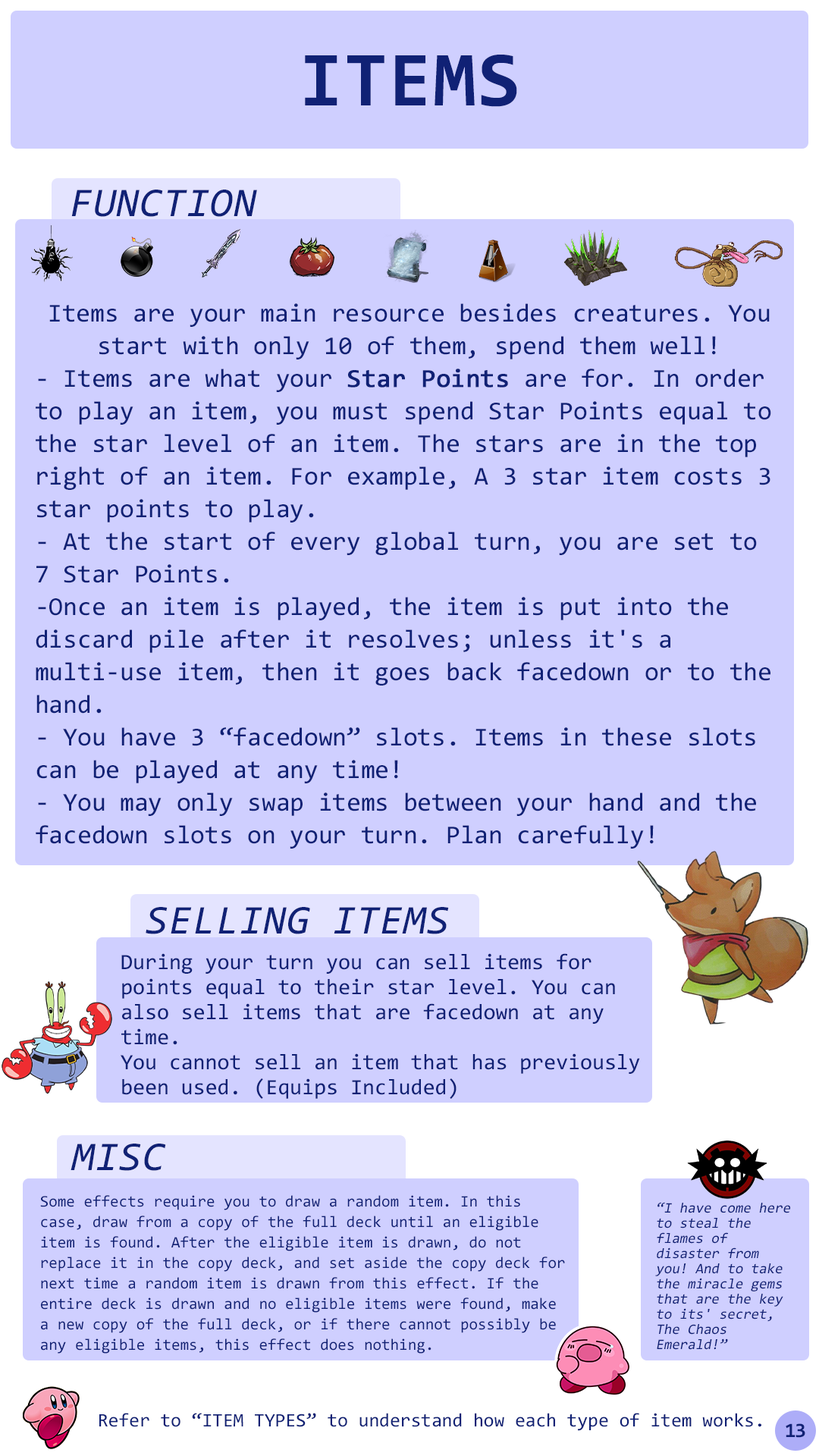
<style>
.page{position:relative;width:819px;height:1456px;background:#cfcfff}
.page>*{position:absolute;margin:0}
.t1{font:78.3px "Consolas-Bold";letter-spacing:0.02em;color:#102175}
.t2{font:41.1px "Consolas-Italic";letter-spacing:0.02em;color:#102175}
.t3{font:25.8px/32.6px "Consolas";color:#102175}
.t4{font:25.8px/32.6px "Consolas";color:#102175;font-weight:bold}
.t5{font:22px/25px "Consolas";color:#102175}
.t6{font:15.9px/20.5px "Consolas";color:#102175}
.t7{font:14.4px/15.2px "Consolas";color:#102175;font-style:italic}
.t8{font:19px "Consolas";color:#102175}
.t9{font:20.5px "Consolas-Bold";letter-spacing:-0.06em;color:#102175}
</style>
<div class="page">
<p class="t1" style="left:305px;top:55px;width:212px;height:52px">ITEMS</p>
<p class="t2" style="left:71px;top:190px;width:186px;height:27px">FUNCTION</p>
<p class="t3" style="left:36px;top:303px;width:735px;height:546px;text-align:center">Items are your main resource besides creatures. You start with only 10 of them, spend them well!<br>- Items are what your <span class="t4">Star Points</span> are for. In order to play an item, you must spend Star Points equal to the star level of an item. The stars are in the top right of an item. For example, A 3 star item costs 3 star points to play.<br>- At the start of every global turn, you are set to 7 Star Points.<br>-Once an item is played, the item is put into the discard pile after it resolves; unless it's a multi-use item, then it goes back facedown or to the hand.<br>- You have 3 “facedown” slots. Items in these slots can be played at any time!<br>- You may only swap items between your hand and the facedown slots on your turn. Plan carefully!</p>
<p class="t2" style="left:146px;top:907px;width:303px;height:27px">SELLING ITEMS</p>
<p class="t5" style="left:121px;top:953px;width:519px;height:146px">During your turn you can sell items for points equal to their star level. You can also sell items that are facedown at any time.<br>You cannot sell an item that has previously been used. (Equips Included)</p>
<p class="t2" style="left:71px;top:1144px;width:95px;height:27px">MISC</p>
<p class="t6" style="left:40px;top:1195px;width:525px;height:159px">Some effects require you to draw a random item. In this case, draw from a copy of the full deck until an eligible item is found. After the eligible item is drawn, do not replace it in the copy deck, and set aside the copy deck for next time a random item is drawn from this effect. If the entire deck is drawn and no eligible items were found, make a new copy of the full deck, or if there cannot possibly be any eligible items, this effect does nothing.</p>
<p class="t7" style="left:655px;top:1202px;width:135px;height:148px">“I have come here to steal the flames of disaster from you! And to take the miracle gems that are the key to its' secret, The Chaos Emerald!”</p>
<p class="t8" style="left:99px;top:1413px;width:662px;height:18px">Refer to “ITEM TYPES” to understand how each type of item works.</p>
<p class="t9" style="left:786px;top:1423px;width:19px;height:15px">13</p>
</div>
